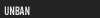
<style>
.page{position:relative;width:100px;height:18px;background:#232323}
.page>*{position:absolute;margin:0}
.t1{font:12px "AlternateGothicNo2BT-Regular";color:#e5e5e5;text-transform:uppercase}
</style>
<div class="page">
<p class="t1" style="left:4px;top:6px;width:26px;height:9px">unban</p>
</div>
